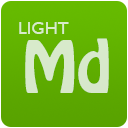
<style>
.page{position:relative;width:128px;height:128px}
.page>*{position:absolute;margin:0}
.t1{font:18px "GillSansMT";color:#d8ebcb}
.t2{font:64px "HoboStd";color:#d7e9cb}
</style>
<div class="page">
<p class="t1" style="left:19px;top:22px;width:50px;height:12px">LIGHT</p>
<p class="t2" style="left:25px;top:38px;width:84px;height:55px">Md</p>
</div>
